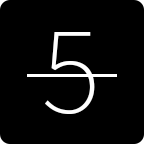
<style>
.page{position:relative;width:144px;height:144px;background:#000000}
.page>*{position:absolute;margin:0}
.t1{font:112px "NotoSansCJKsc-Thin";color:#fefefe}
</style>
<div class="page">
<p class="t1" style="left:45px;top:32px;width:50px;height:82px">5</p>
</div>
